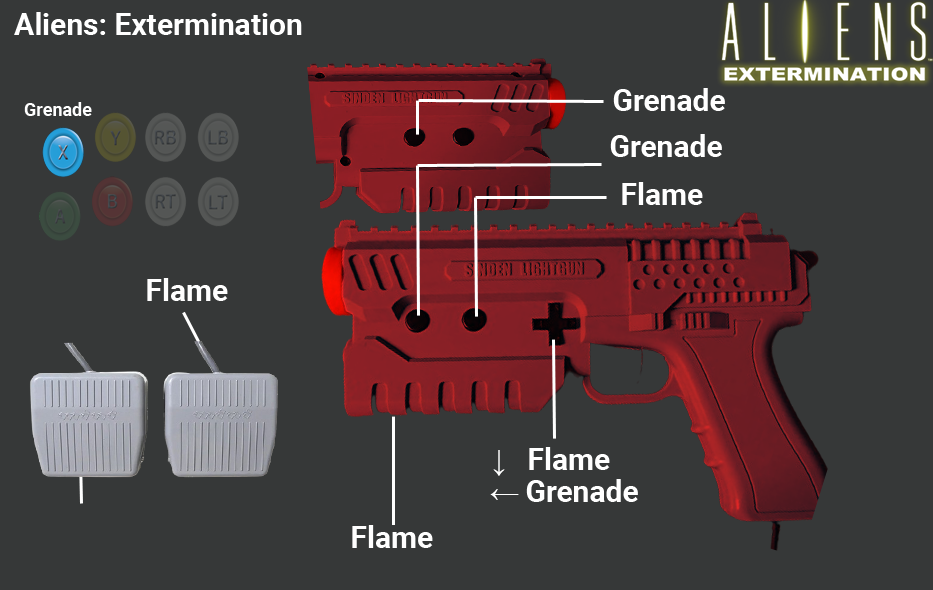
<style>
.page{position:relative;width:933px;height:590px;background:#363838}
.page>*{position:absolute;margin:0}
.t1{font:30px "Roboto-Bold";color:#ffffff}
.t2{font:18px "Roboto-Bold";color:#ffffff}
.t3{font:30px "MicrosoftSansSerif";color:#ffffff}
</style>
<div class="page">
<p class="t1" style="left:14px;top:12px;width:288px;height:23px">Aliens: Extermination</p>
<p class="t1" style="left:613px;top:88px;width:112px;height:23px">Grenade</p>
<p class="t2" style="left:24px;top:102px;width:68px;height:14px">Grenade</p>
<p class="t1" style="left:610px;top:134px;width:112px;height:23px">Grenade</p>
<p class="t1" style="left:622px;top:182px;width:81px;height:23px">Flame</p>
<p class="t1" style="left:147px;top:278px;width:81px;height:23px">Flame</p>
<p class="t1" style="left:493px;top:447px;width:117px;height:29px"><span class="t3">↓ </span>Flame</p>
<p class="t1" style="left:490px;top:479px;width:148px;height:23px"><span class="t3">← </span>Grenade</p>
<p class="t1" style="left:352px;top:525px;width:81px;height:23px">Flame</p>
</div>
